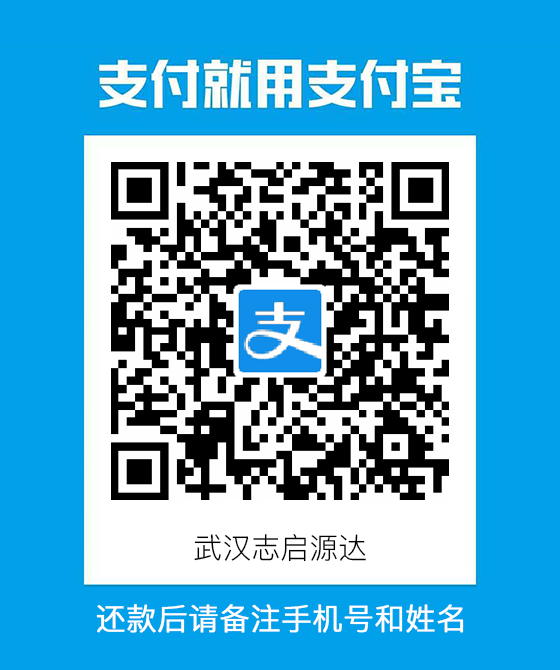
<style>
.page{position:relative;width:560px;height:670px;background:#00a0ea}
.page>*{position:absolute;margin:0}
.t1{font:29px "PingFang-SC-Regular";color:#000000}
.t2{font:30px "PingFang-SC-Regular";color:#ffffff;font-weight:bold}
</style>
<div class="page">
<p class="t1" style="left:194px;top:534px;width:172px;height:28px">武汉志启源达</p>
<p class="t2" style="left:96px;top:604px;width:368px;height:29px">还款后请备注手机号和姓名</p>
</div>
